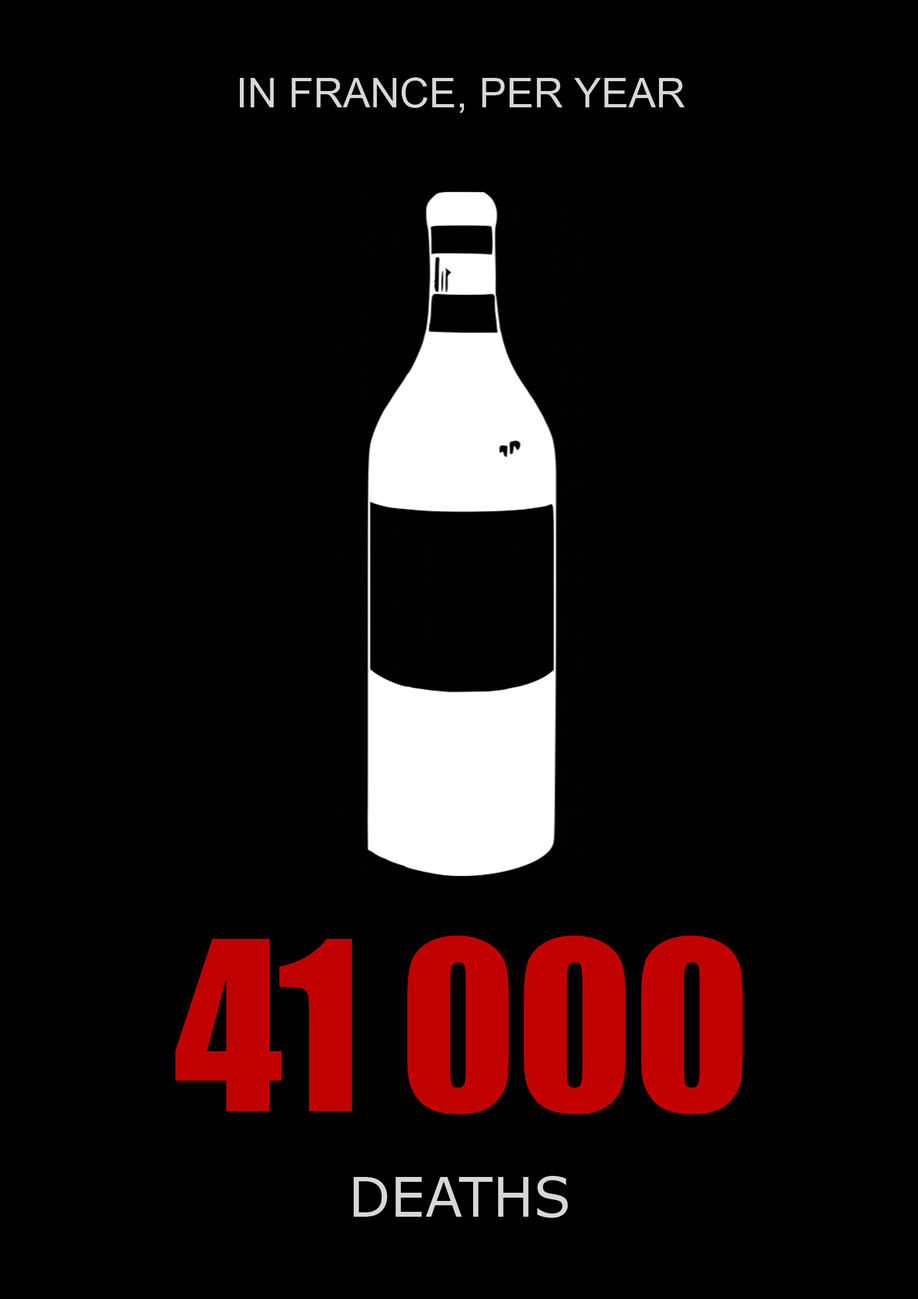
<style>
.page{position:relative;width:918px;height:1299px;background:#000000}
.page>*{position:absolute;margin:0}
.t1{font:40.9px "ArialMT";color:#d7d7d7}
.t2{font:218px "Impact";color:#c10000}
.t3{font:54.5px "Verdana";color:#d7d7d7}
</style>
<div class="page">
<p class="t1" style="left:240px;top:77px;width:445px;height:36px">IN FRANCE, PER YEAR</p>
<p class="t2" style="left:175px;top:935px;width:568px;height:180px">41 000</p>
<p class="t3" style="left:353px;top:1176px;width:215px;height:42px">DEATHS</p>
</div>
